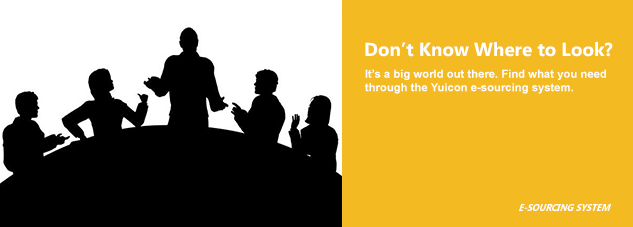
<style>
.page{position:relative;width:633px;height:227px;background:#f4ba21}
.page>*{position:absolute;margin:0}
.t1{font:18.8px "SegoeUI-Bold";color:#ffffff}
.t2{font:11.3px "Arial-BoldMT";color:#ffffff}
.t3{font:10.2px "SegoeUI-Bold";color:#ffffff;text-transform:uppercase;scale:0.88 1}
</style>
<div class="page">
<p class="t1" style="left:365px;top:42px;width:248px;height:15px">Don’t Know Where to Look?</p>
<p class="t2" style="left:365px;top:69px;width:241px;height:25px">It’s a big world out there. Find what you need <br>through the Yuicon e-sourcing system.</p>
<p class="t3" style="left:519px;top:204px;width:92px;height:7px">e-Sourcing System</p>
</div>
